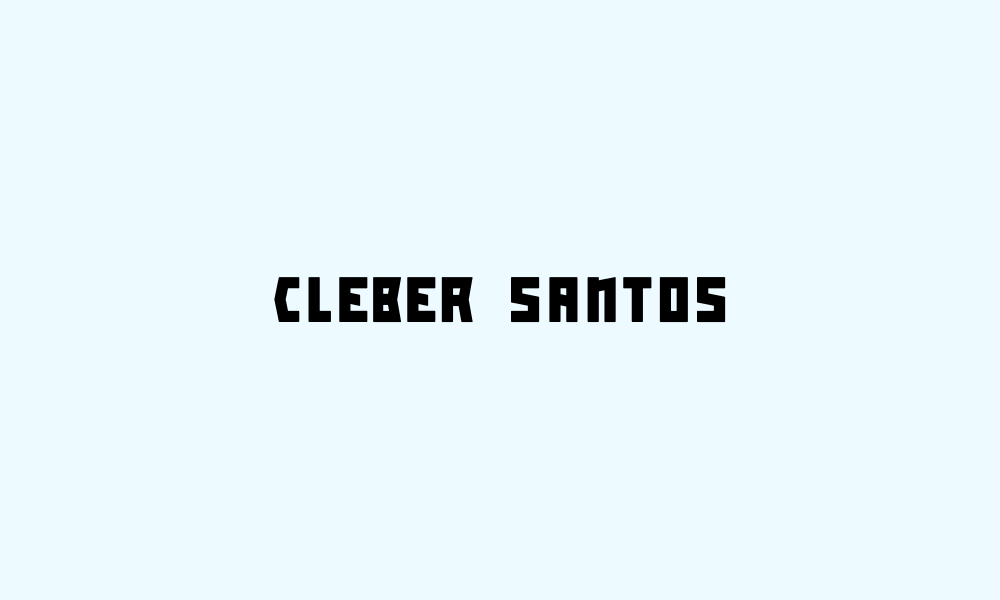
<style>
.page{position:relative;width:1000px;height:600px;background:#edfaff}
.page>*{position:absolute;margin:0}
.t1{font:60px "Slash";color:#000000}
</style>
<div class="page">
<p class="t1" style="left:274px;top:277px;width:452px;height:46px">CLEBER SANTOS</p>
</div>
